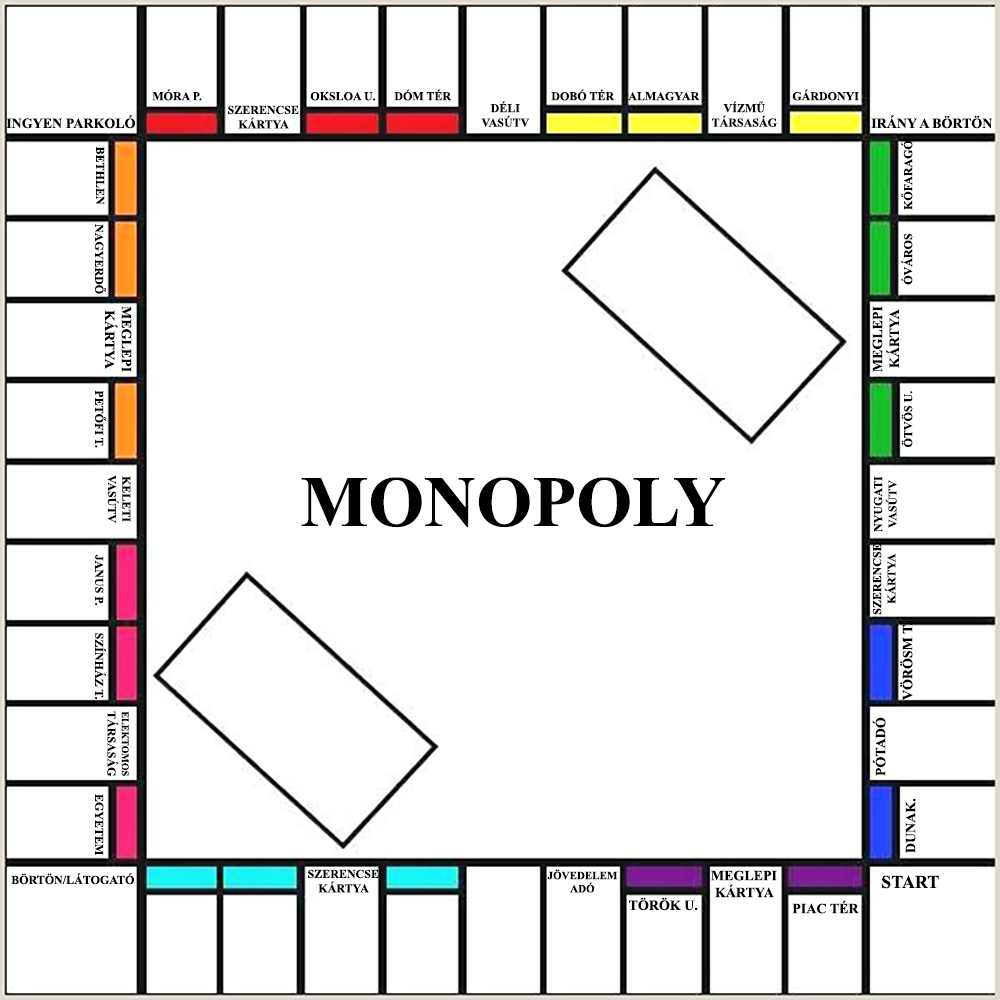
<style>
.page{position:relative;width:1000px;height:1000px;background:#ffffff}
.page>*{position:absolute;margin:0}
.t1{font:12px "TimesNewRomanPS-BoldMT";color:#000000}
.t2{font:14px "TimesNewRomanPS-BoldMT";color:#000000}
.t3{font:72px "TimesNewRomanPS-BoldMT";color:#000000}
.t4{font:10px "TimesNewRomanPS-BoldMT";color:#000000}
.t5{font:11px "TimesNewRomanPS-BoldMT";color:#000000}
.t6{font:18px "TimesNewRomanPS-BoldMT";color:#000000}
</style>
<div class="page">
<p class="t1" style="left:152px;top:89px;width:50px;height:12px">MÓRA P.</p>
<p class="t1" style="left:394px;top:89px;width:58px;height:12px">DÓM TÉR</p>
<p class="t1" style="left:551px;top:89px;width:64px;height:12px">DOBÓ TÉR</p>
<p class="t1" style="left:792px;top:89px;width:67px;height:12px">GÁRDONYI</p>
<p class="t1" style="left:310px;top:92px;width:66px;height:9px">OKSLOA U.</p>
<p class="t1" style="left:481px;top:101px;width:49px;height:26px;text-align:center">DÉLI<br>VASÚTV</p>
<p class="t1" style="left:628px;top:92px;width:72px;height:9px">ALMAGYAR</p>
<p class="t1" style="left:712px;top:101px;width:65px;height:26px;text-align:center">VÍZMŰ<br>TÁRSASÁG</p>
<p class="t1" style="left:228px;top:105px;width:71px;height:24px;text-align:center">SZERENCSE<br>KÁRTYA</p>
<p class="t2" style="left:6px;top:115px;width:129px;height:14px">INGYEN PARKOLÓ</p>
<p class="t2" style="left:871px;top:115px;width:122px;height:14px">IRÁNY A BÖRTÖN</p>
<p class="t1" style="left:96px;top:146px;width:9px;height:59px;rotate:90deg">BETHLEN</p>
<p class="t1" style="left:901px;top:140px;width:12px;height:70px;rotate:-90deg">KŐFARAGÓ</p>
<p class="t1" style="left:95px;top:224px;width:11px;height:70px;rotate:90deg">NAGYERDŐ</p>
<p class="t1" style="left:901px;top:233px;width:12px;height:52px;rotate:-90deg">ÓVÁROS</p>
<p class="t2" style="left:105px;top:306px;width:27px;height:66px;text-align:center;rotate:90deg">MEGLEPI<br>KÁRTYA</p>
<p class="t2" style="left:872px;top:306px;width:27px;height:66px;text-align:center;rotate:-90deg">MEGLEPI<br>KÁRTYA</p>
<p class="t1" style="left:95px;top:390px;width:11px;height:58px;rotate:90deg">PETŐFI T.</p>
<p class="t1" style="left:901px;top:391px;width:12px;height:56px;rotate:-90deg">ÖTVÖS U.</p>
<p class="t1" style="left:107px;top:475px;width:24px;height:48px;text-align:center;rotate:90deg">KELETI<br>VASÚTV</p>
<p class="t3" style="left:301px;top:477px;width:424px;height:51px">MONOPOLY</p>
<p class="t1" style="left:873px;top:476px;width:24px;height:56px;text-align:center;rotate:-90deg">NYUGATI<br>VASÚTV</p>
<p class="t1" style="left:872px;top:543px;width:24px;height:72px;text-align:center;rotate:-90deg">SZERENCSE<br>KÁRTYA</p>
<p class="t1" style="left:95px;top:554px;width:9px;height:52px;rotate:90deg">JANUS P.</p>
<p class="t2" style="left:900px;top:622px;width:13px;height:79px;rotate:-90deg">VÖRÖSM T.</p>
<p class="t1" style="left:95px;top:633px;width:11px;height:67px;rotate:90deg">SZÍNHÁZ T.</p>
<p class="t4" style="left:107px;top:711px;width:22px;height:66px;text-align:center;rotate:90deg">ELEKTOMOS<br><span class="t1">TÁRSASÁG</span></p>
<p class="t2" style="left:872px;top:717px;width:14px;height:59px;rotate:-90deg">PÓTADÓ</p>
<p class="t1" style="left:95px;top:794px;width:9px;height:62px;rotate:90deg">EGYETEM</p>
<p class="t2" style="left:905px;top:798px;width:11px;height:55px;rotate:-90deg">DUNAK.</p>
<p class="t1" style="left:308px;top:869px;width:71px;height:24px;text-align:center">SZERENCSE<br>KÁRTYA</p>
<p class="t5" style="left:547px;top:869px;width:71px;height:24px;text-align:center">JÖVEDELEM<br>ADÓ</p>
<p class="t2" style="left:711px;top:870px;width:66px;height:28px;text-align:center">MEGLEPI<br>KÁRTYA</p>
<p class="t1" style="left:11px;top:873px;width:123px;height:12px">BÖRTÖN/LÁTOGATÓ</p>
<p class="t6" style="left:882px;top:875px;width:57px;height:14px">START</p>
<p class="t2" style="left:629px;top:897px;width:69px;height:14px">TÖRÖK U.</p>
<p class="t2" style="left:792px;top:900px;width:67px;height:14px">PIAC TÉR</p>
</div>
